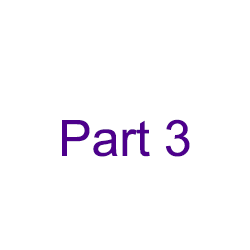
<style>
.page{position:relative;width:250px;height:250px;background:#ffffff}
.page>*{position:absolute;margin:0}
.t1{font:50px "ArialMT";color:#4d008c}
</style>
<div class="page">
<p class="t1" style="left:62px;top:119px;width:128px;height:38px">Part 3</p>
</div>
